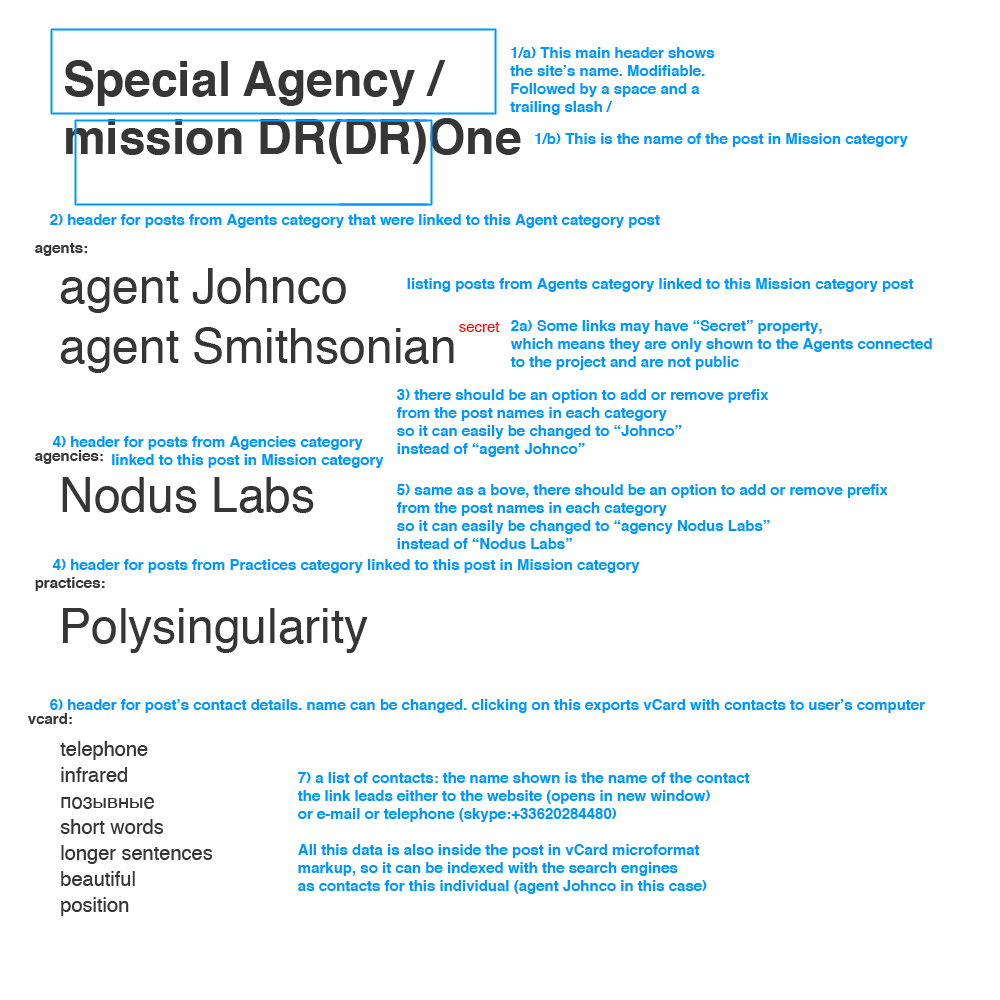
<style>
.page{position:relative;width:1000px;height:1000px;background:#ffffff}
.page>*{position:absolute;margin:0}
.t1{font:15px "Helvetica-Bold";color:#0096ff}
.t2{font:48px "Helvetica-Bold";color:#363636}
.t3{font:15px "Helvetica-Bold";color:#363636}
.t4{font:48px "Helvetica";color:#363636}
.t5{font:15px "Helvetica";color:#ff0000}
.t6{font:20px/26px "Helvetica";color:#363636}
</style>
<div class="page">
<p class="t1" style="left:510px;top:47px;width:205px;height:68px">1/a) This main header shows the site’s name. Modifiable. Followed by a space and a trailing slash /</p>
<p class="t2" style="left:65px;top:60px;width:456px;height:104px">Special Agency /<br>mission DR(DR)One</p>
<p class="t1" style="left:535px;top:133px;width:373px;height:14px">1/b) This is the name of the post in Mission category</p>
<p class="t1" style="left:50px;top:214px;width:610px;height:14px">2) header for posts from Agents category that were linked to this Agent category post</p>
<p class="t3" style="left:35px;top:243px;width:52px;height:13px">agents:</p>
<p class="t4" style="left:60px;top:268px;width:286px;height:45px">agent Johnco</p>
<p class="t1" style="left:407px;top:278px;width:507px;height:14px">listing posts from Agents category linked to this Mission category post</p>
<p class="t4" style="left:60px;top:327px;width:394px;height:46px">agent Smithsonian</p>
<p class="t5" style="left:459px;top:322px;width:41px;height:10px">secret</p>
<p class="t1" style="left:510px;top:320px;width:422px;height:50px">2a) Some links may have “Secret” property,<br>which means they are only shown to the Agents connected<br>to the project and are not public</p>
<p class="t1" style="left:396px;top:389px;width:373px;height:68px">3) there should be an option to add or remove prefix<br>from the post names in each category<br>so it can easily be changed to “Johnco”<br>instead of “agent Johnco”</p>
<p class="t1" style="left:52px;top:436px;width:332px;height:32px">4) header for posts from Agencies category<br>              linked to this post in Mission category</p>
<p class="t3" style="left:35px;top:450px;width:68px;height:14px">agencies:</p>
<p class="t4" style="left:62px;top:477px;width:252px;height:36px">Nodus Labs</p>
<p class="t1" style="left:396px;top:484px;width:492px;height:65px">5) same as a bove, there should be an option to add or remove prefix<br>from the post names in each category<br>so it can easily be changed to “agency Nodus Labs”<br>instead of “Nodus Labs”</p>
<p class="t1" style="left:52px;top:559px;width:588px;height:14px">4) header for posts from Practices category linked to this post in Mission category</p>
<p class="t3" style="left:35px;top:577px;width:70px;height:14px">practices:</p>
<p class="t4" style="left:63px;top:608px;width:305px;height:45px">Polysingularity</p>
<p class="t1" style="left:50px;top:699px;width:875px;height:14px">6) header for post’s contact details. name can be changed. clicking on this exports vCard with contacts to user’s computer</p>
<p class="t3" style="left:28px;top:713px;width:44px;height:11px">vcard:</p>
<p class="t6" style="left:60px;top:741px;width:152px;height:175px">telephone<br>infrared<br>позывные<br>short words<br>longer sentences<br>beautiful<br>position</p>
<p class="t1" style="left:297px;top:772px;width:453px;height:122px">7) a list of contacts: the name shown is the name of the contact<br>the link leads either to the website (opens in new window)<br>or e-mail or telephone (skype:+33620284480)<br><br>All this data is also inside the post in vCard microformat <br>markup, so it can be indexed with the search engines<br>as contacts for this individual (agent Johnco in this case)</p>
</div>
